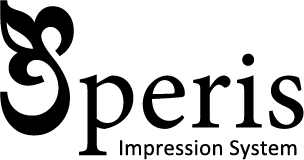
<style>
.page{position:relative;width:304px;height:160px;background:#ffffff}
.page>*{position:absolute;margin:0}
.t1{font:23px "Calibri";letter-spacing:0.01em;color:#000000}
.t2{font:115.1px "MinionPro-Regular";letter-spacing:0.01em;color:#000000}
</style>
<div class="page">
<p class="t1" style="left:79px;top:53px;width:225px;height:107px;text-align:center"><span class="t2">    peris<br></span>                          Impression System</p>
</div>
